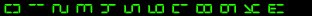
<style>
.page{position:relative;width:312px;height:16px;background:#000000}
.page>*{position:absolute;margin:0}
.t1{font:24px "Digital-7Mono";letter-spacing:0.05em;color:#24ff00}
</style>
<div class="page">
<p class="t1" style="left:4px;top:3px;width:17px;height:11px;rotate:-90deg">0</p>
<p class="t1" style="left:28px;top:3px;width:17px;height:3px;rotate:-90deg">1</p>
<p class="t1" style="left:52px;top:3px;width:17px;height:11px;rotate:-90deg">2</p>
<p class="t1" style="left:76px;top:3px;width:17px;height:10px;rotate:-90deg">3</p>
<p class="t1" style="left:100px;top:3px;width:16px;height:11px;rotate:-90deg">4</p>
<p class="t1" style="left:124px;top:3px;width:17px;height:11px;rotate:-90deg">5</p>
<p class="t1" style="left:148px;top:3px;width:17px;height:11px;rotate:-90deg">6</p>
<p class="t1" style="left:172px;top:3px;width:16px;height:11px;rotate:-90deg">7</p>
<p class="t1" style="left:196px;top:3px;width:17px;height:11px;rotate:-90deg">8</p>
<p class="t1" style="left:220px;top:3px;width:17px;height:11px;rotate:-90deg">9</p>
<p class="t1" style="left:244px;top:3px;width:16px;height:11px;rotate:-90deg">k</p>
<p class="t1" style="left:268px;top:3px;width:16px;height:11px;rotate:-90deg">m</p>
</div>
